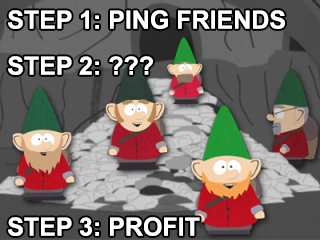
<style>
.page{position:relative;width:320px;height:240px}
.page>*{position:absolute;margin:0}
.t1{font:25px/23px "Arial-BoldMT";color:#ffffff;text-transform:uppercase}
</style>
<div class="page">
<p class="t1" style="left:8px;top:10px;width:277px;height:226px">Step 1: Ping Friends<br><br>Step 2: ???<br><br><br><br><br><br><br>Step 3: Profit</p>
</div>
